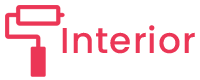
<style>
.page{position:relative;width:200px;height:80px;background:#ffffff}
.page>*{position:absolute;margin:0}
.t1{font:36px "Poppins-Medium";letter-spacing:0.025em;color:#eb3656}
</style>
<div class="page">
<p class="t1" style="left:62px;top:25px;width:133px;height:29px">Interior</p>
</div>
